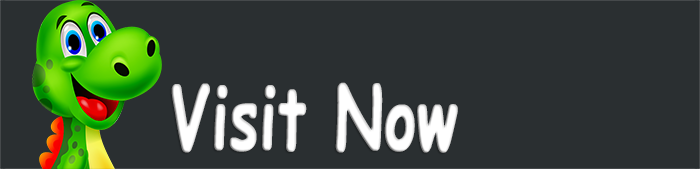
<style>
.page{position:relative;width:700px;height:169px;background:#2a2f31}
.page>*{position:absolute;margin:0}
.t1{font:86px "ComicSansMS-Bold";color:#ffffff;font-weight:bold;scale:0.69 1}
</style>
<div class="page">
<p class="t1" style="left:171px;top:82px;width:287px;height:71px">Visit Now</p>
</div>
